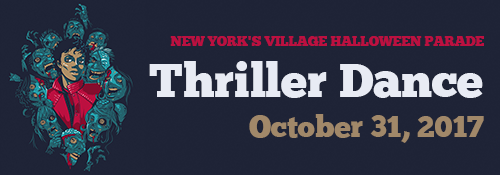
<style>
.page{position:relative;width:500px;height:175px;background:#1e2336}
.page>*{position:absolute;margin:0}
.t1{font:13.5px/9.2px "ChunkFive-Roman";color:#bc1040;text-transform:uppercase}
.t2{font:47.5px/50.8px "ChunkFive-Roman";color:#e8ebf4}
.t3{font:29.8px/40px "ChunkFive-Roman";color:#a18869}
</style>
<div class="page">
<p class="t1" style="left:149px;top:36px;width:335px;height:107px;text-align:right">New York's Village Halloween Parade<br><span class="t2">Thriller Dance<br></span><span class="t3">October 31, 2017</span></p>
</div>
